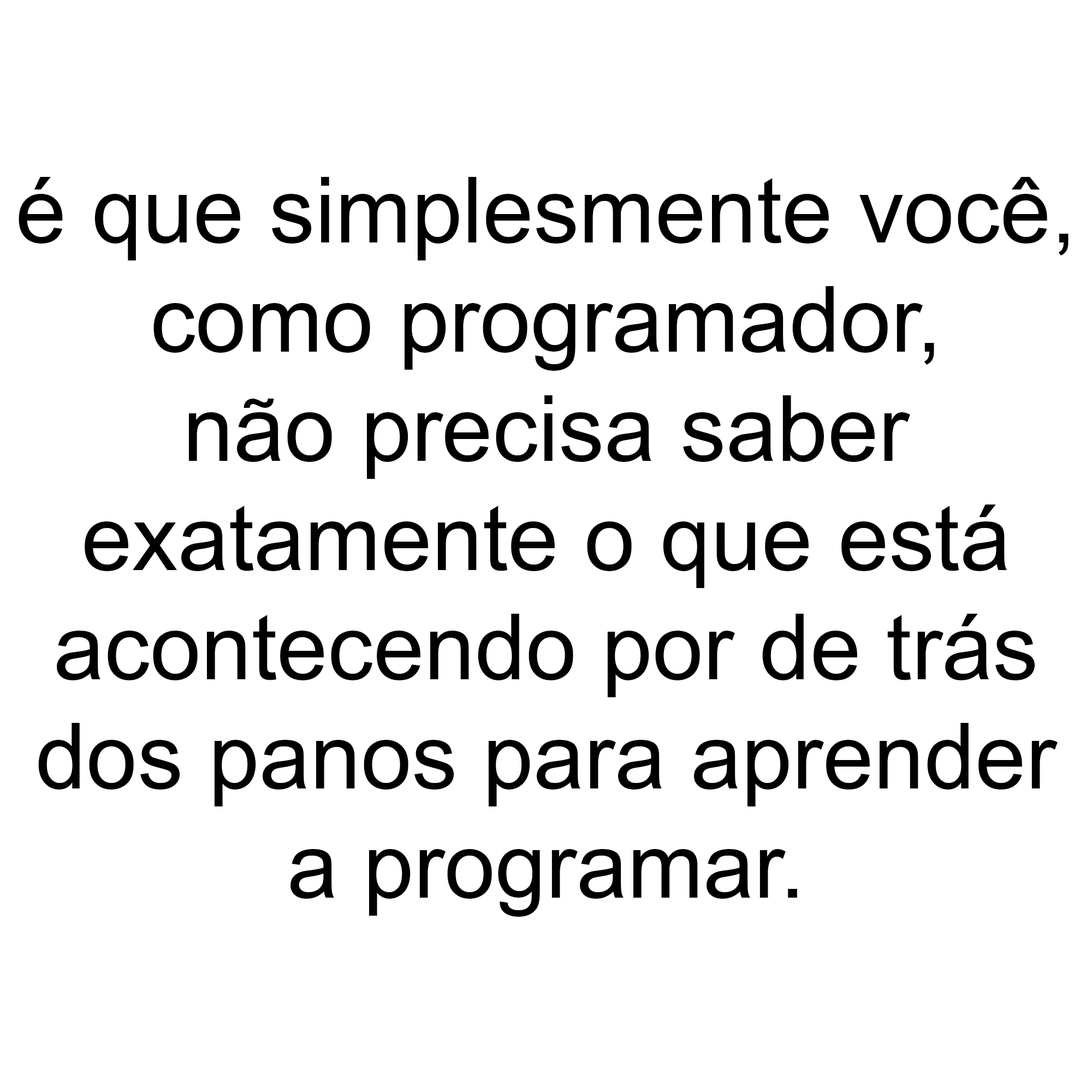
<style>
.page{position:relative;width:1092px;height:1092px;background:#ffffff}
.page>*{position:absolute;margin:0}
.t1{font:91px "ArialMT";color:#000000}
</style>
<div class="page">
<p class="t1" style="left:19px;top:177px;width:1050px;height:740px;text-align:center">é que simplesmente você,<br>como programador,<br>não precisa saber<br>exatamente o que está<br>acontecendo por de trás<br>dos panos para aprender<br>a programar.</p>
</div>
